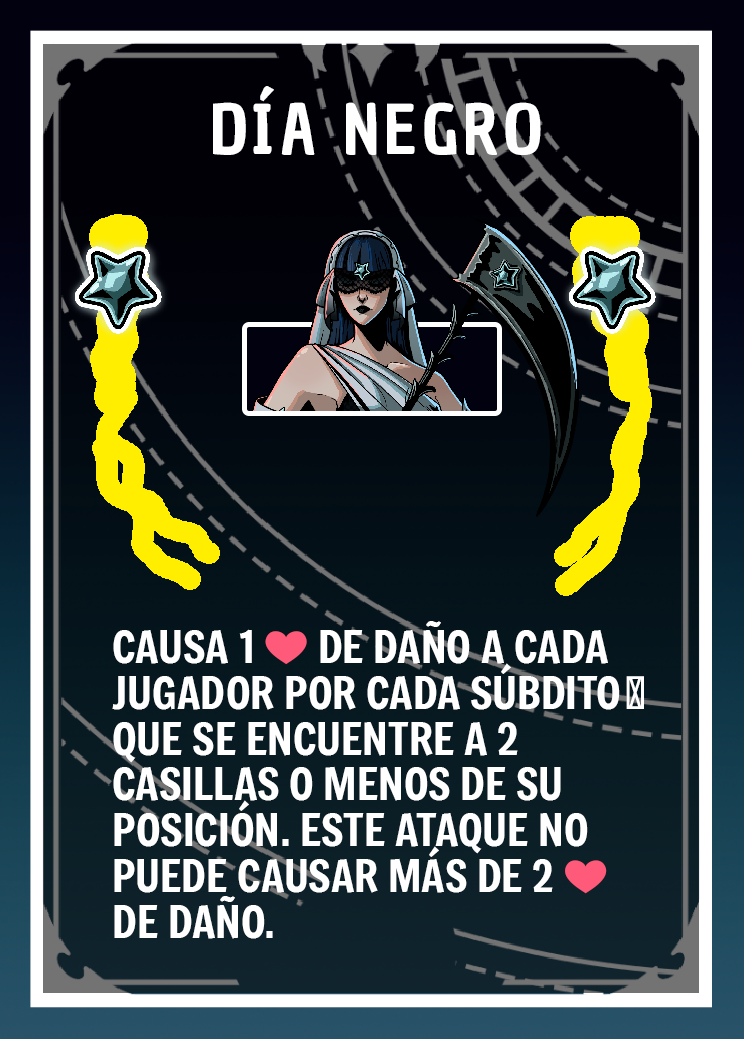
<style>
.page{position:relative;width:744px;height:1039px}
.page>*{position:absolute;margin:0}
.t1{font:66.7px "ChauPhilomeneOne-Regular";letter-spacing:0.075em;color:#ffffff}
.t2{font:43.7px/45.8px "Freeman-Regular";color:#ffffff}
.t3{font:43.7px/45.8px "EmojiOneColor";color:#ffffff}
</style>
<div class="page">
<p class="t1" style="left:213px;top:86px;width:328px;height:69px">DÍA NEGRO</p>
<p class="t2" style="left:112px;top:621px;width:532px;height:318px">CAUSA 1 <span class="t3">❤️</span> DE DAÑO A CADA JUGADOR POR CADA SÚBDITO👾 QUE SE ENCUENTRE A 2 CASILLAS O MENOS DE SU POSICIÓN. ESTE ATAQUE NO PUEDE CAUSAR MÁS DE 2 <span class="t3">❤️</span>DE DAÑO.</p>
</div>
